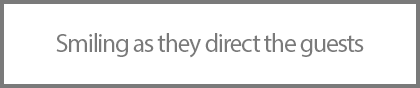
<style>
.page{position:relative;width:420px;height:88px;background:#ffffff}
.page>*{position:absolute;margin:0}
.t1{font:26px "MyriadPro-Regular";letter-spacing:-0.05em;color:#7a7a7a}
</style>
<div class="page">
<p class="t1" style="left:56px;top:33px;width:308px;height:25px">Smiling as they direct the guests</p>
</div>
